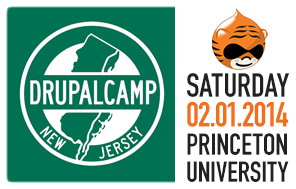
<style>
.page{position:relative;width:296px;height:189px;background:#ffffff}
.page>*{position:absolute;margin:0}
.t1{font:34.4px/29.7px "DINEngschriftStd";letter-spacing:-0.025em;color:#f36f18;text-transform:uppercase}
.t2{font:33px/28.3px "DINEngschriftStd";color:#212121;text-transform:uppercase}
.t3{font:29.7px/28.3px "DINEngschriftStd";color:#212121;text-transform:uppercase}
.t4{font:28.3px/27px "DINEngschriftStd";color:#212121;text-transform:uppercase}
</style>
<div class="page">
<p class="t1" style="left:187px;top:73px;width:102px;height:109px"><span class="t2">SATURDAY<br></span>02.01.2014<br><span class="t3">Princeton </span><span class="t4">University</span></p>
</div>
